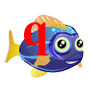
<style>
.page{position:relative;width:90px;height:90px;background:#ffffff}
.page>*{position:absolute;margin:0}
.t1{font:48px "TimesNewRomanPS-BoldMT";color:#ff0000}
</style>
<div class="page">
<p class="t1" style="left:24px;top:22px;width:25px;height:34px">q</p>
</div>
